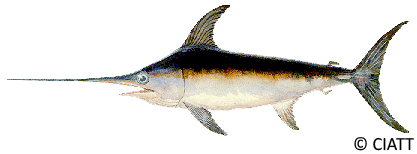
<style>
.page{position:relative;width:417px;height:154px;background:#ffffff}
.page>*{position:absolute;margin:0}
.t1{font:18.7px "Calibri";color:#000000}
</style>
<div class="page">
<p class="t1" style="left:354px;top:137px;width:60px;height:14px">© CIATT</p>
</div>
